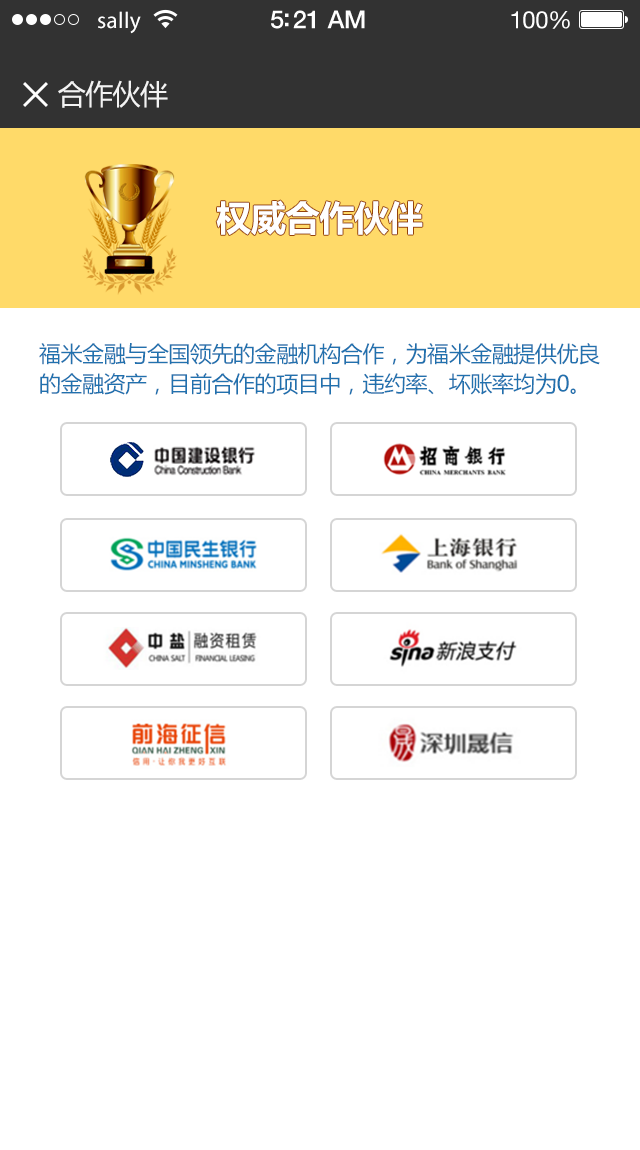
<style>
.page{position:relative;width:640px;height:1150px;background:#ffffff}
.page>*{position:absolute;margin:0}
.t1{font:23px "MyriadPro-Regular";letter-spacing:0.02em;color:#ffffff}
.t2{font:25px "HelveticaNeue-Medium";letter-spacing:-0.02em;color:#ffffff}
.t3{font:24px "HelveticaNeue";letter-spacing:-0.02em;color:#ffffff}
.t4{font:28px "MicrosoftYaHei";letter-spacing:-0.02em;color:#f3f3f3}
.t5{font:35px "MicrosoftYaHei-Bold";letter-spacing:-0.02em;color:#ffffff}
.t6{font:22px/30px "MicrosoftYaHei";letter-spacing:-0.02em;color:#2171ae}
</style>
<div class="page">
<p class="t1" style="left:98px;top:11px;width:43px;height:23px">sally</p>
<p class="t2" style="left:271px;top:10px;width:94px;height:19px">5:21 AM</p>
<p class="t3" style="left:511px;top:11px;width:59px;height:18px">100%</p>
<p class="t4" style="left:58px;top:80px;width:110px;height:28px">合作伙伴</p>
<p class="t5" style="left:216px;top:200px;width:207px;height:35px">权威合作伙伴</p>
<p class="t6" style="left:39px;top:343px;width:561px;height:52px">福米金融与全国领先的金融机构合作，为福米金融提供优良的金融资产，目前合作的项目中，违约率、坏账率均为0。</p>
</div>
